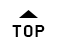
<style>
.page{position:relative;width:57px;height:51px;background:#ffffff}
.page>*{position:absolute;margin:0}
.t1{font:18px "DoHyeon-Regular";letter-spacing:0.1em;color:#000000}
</style>
<div class="page">
<p class="t1" style="left:12px;top:25px;width:33px;height:12px">TOP</p>
</div>
